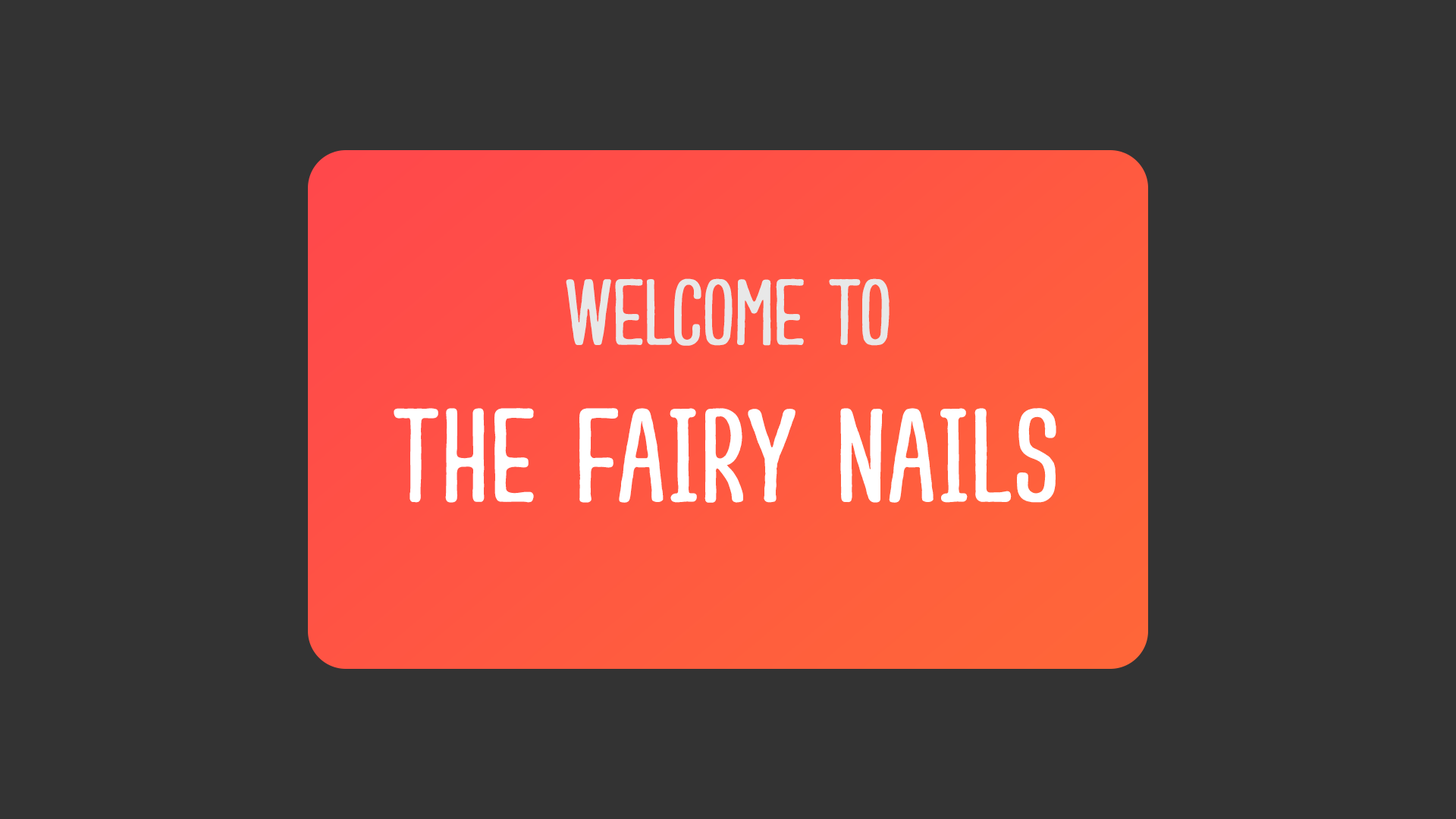
<style>
.page{position:relative;width:1456px;height:819px;background:#333333}
.page>*{position:absolute;margin:0}
.t1{font:130.4px "FS-Smyrna-Regular";color:#ffffff;font-weight:bold}
.t2{font:92.5px "FS-Smyrna-Regular";color:#e8e8e8}
</style>
<div class="page">
<p class="t1" style="left:394px;top:278px;width:662px;height:225px;text-align:center"><span class="t2">welcome to<br></span>The Fairy Nails</p>
</div>
